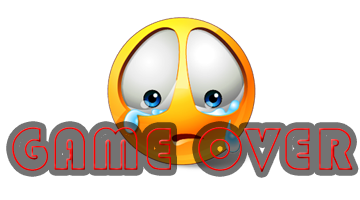
<style>
.page{position:relative;width:360px;height:200px;background:#ffffff}
.page>*{position:absolute;margin:0}
.t1{font:60px "CircleHollow";letter-spacing:0.05em}
</style>
<div class="page">
<p class="t1" style="left:12px;top:127px;width:341px;height:45px">GAME OVER</p>
</div>
